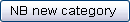
<style>
.page{position:relative;width:130px;height:22px}
.page>*{position:absolute;margin:0}
.t1{font:11.9px "ArialMT";color:#000000;scale:1.16 1}
</style>
<div class="page">
<p class="t1" style="left:11px;top:6px;width:105px;height:11px">NB new category</p>
</div>
